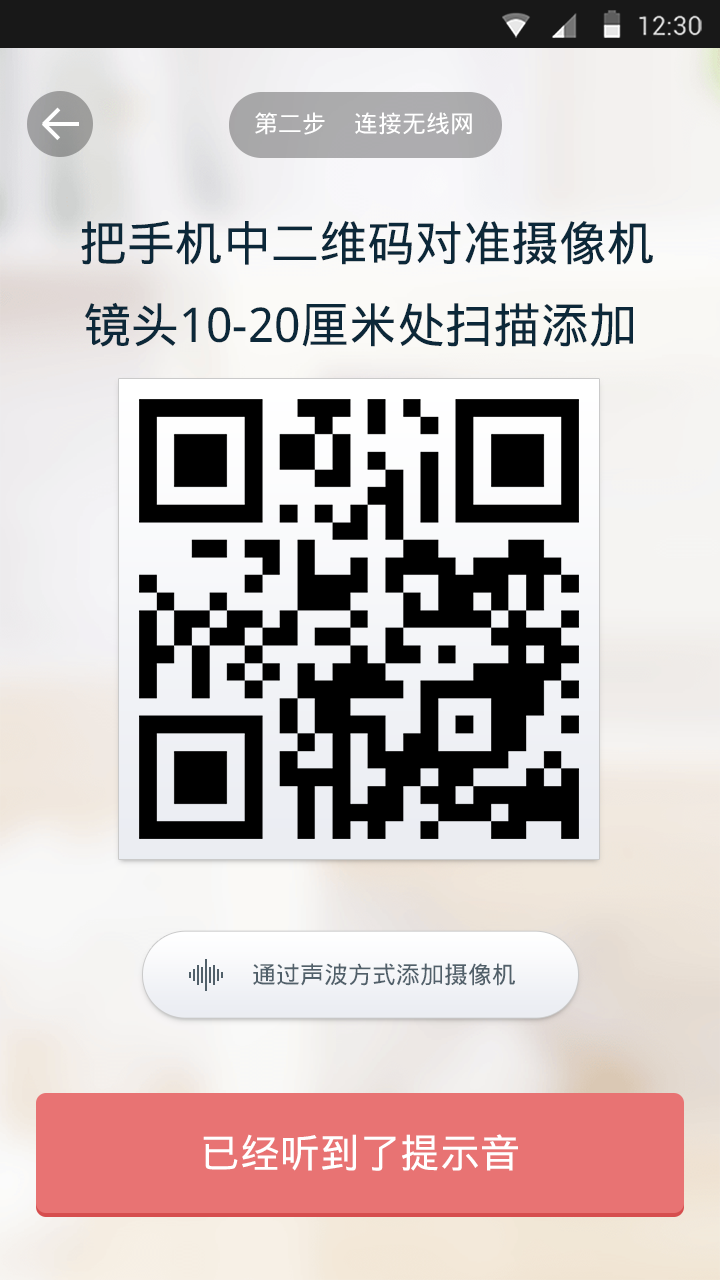
<style>
.page{position:relative;width:720px;height:1280px}
.page>*{position:absolute;margin:0}
.t1{font:24px "DroidSansFallback";color:#ffffff}
.t2{font:48px "DroidSansFallback";color:#0c2839}
.t3{font:24px "DroidSansFallback";color:#51606a}
.t4{font:40px "DroidSansFallback";color:#ffffff}
</style>
<div class="page">
<p class="t1" style="left:255px;top:112px;width:70px;height:23px">第二步</p>
<p class="t1" style="left:355px;top:112px;width:117px;height:23px">连接无线网</p>
<p class="t2" style="left:81px;top:221px;width:572px;height:44px">把手机中二维码对准摄像机</p>
<p class="t2" style="left:84px;top:302px;width:549px;height:45px">镜头10-20厘米处扫描添加</p>
<p class="t3" style="left:253px;top:963px;width:262px;height:23px">通过声波方式添加摄像机</p>
<p class="t4" style="left:203px;top:1134px;width:315px;height:37px">已经听到了提示音</p>
</div>
